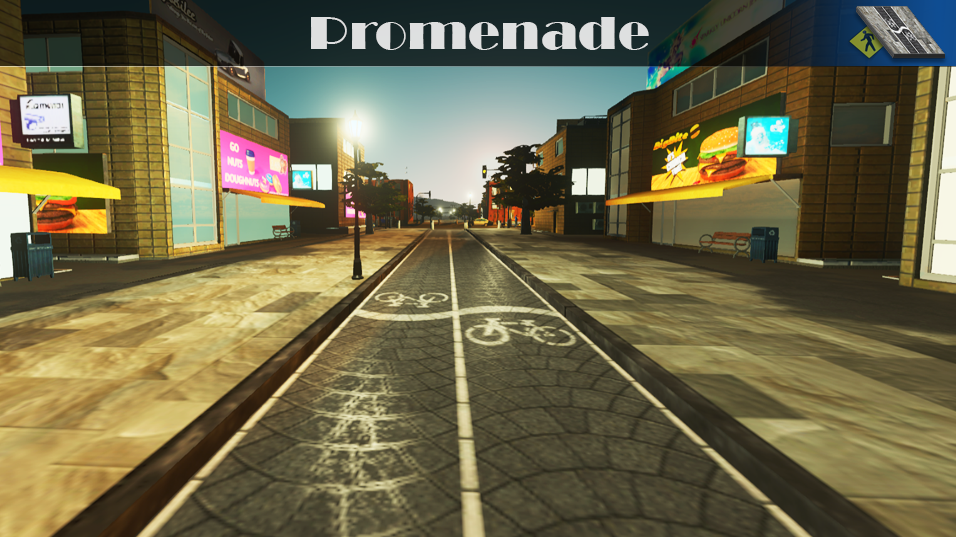
<style>
.page{position:relative;width:956px;height:537px}
.page>*{position:absolute;margin:0}
.t1{font:48px "Broadway";color:#dee0e0;scale:1.11 1}
</style>
<div class="page">
<p class="t1" style="left:311px;top:17px;width:338px;height:33px">Promenade</p>
</div>
